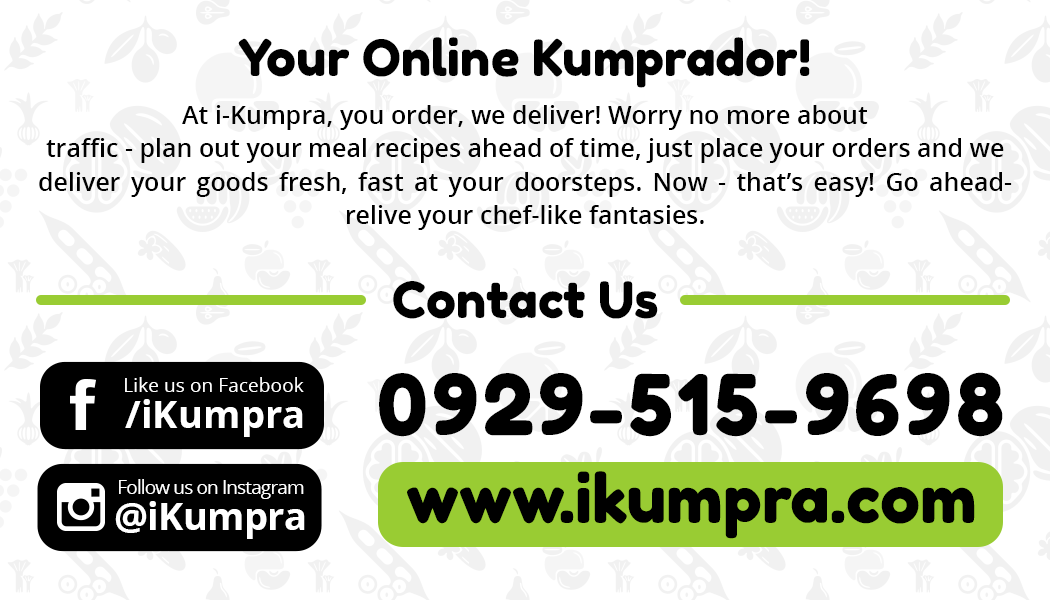
<style>
.page{position:relative;width:1050px;height:600px;background:#ffffff}
.page>*{position:absolute;margin:0}
.t1{font:50px "FredokaOne-Regular";color:#000000}
.t2{font:25px/33.3px "OpenSans-Semibold";color:#000000}
.t3{font:19.2px "OpenSans";color:#ffffff}
.t4{font:83.3px "FredokaOne-Regular";letter-spacing:0.05em;color:#000000}
.t5{font:38.4px "OpenSans-Bold";color:#ffffff}
.t6{font:66.7px "FredokaOne-Regular";color:#000000}
.t7{font:19.2px "OpenSans";letter-spacing:-0.05em;color:#ffffff}
.t8{font:38.4px "OpenSans-Bold";letter-spacing:-0.025em;color:#ffffff}
</style>
<div class="page">
<p class="t1" style="left:238px;top:37px;width:572px;height:51px">Your Online Kumprador!</p>
<p class="t2" style="left:39px;top:105px;width:973px;height:125px;text-align:justify">At i-Kumpra, you order, we deliver! Worry no more about<br>traffic - plan out your meal recipes ahead of time, just place your orders and we<br>deliver your goods fresh, fast at your doorsteps. Now - that’s easy! Go ahead- relive your chef-like fantasies.</p>
<p class="t1" style="left:393px;top:281px;width:265px;height:38px">Contact Us</p>
<p class="t3" style="left:125px;top:377px;width:179px;height:15px">Like us on Facebook</p>
<p class="t4" style="left:379px;top:372px;width:624px;height:65px">0929-515-9698</p>
<p class="t5" style="left:125px;top:399px;width:178px;height:38px">/iKumpra</p>
<p class="t6" style="left:407px;top:471px;width:568px;height:68px">www.ikumpra.com</p>
<p class="t7" style="left:119px;top:479px;width:185px;height:20px">Follow us on Instagram</p>
<p class="t8" style="left:115px;top:501px;width:190px;height:38px">@iKumpra</p>
</div>
